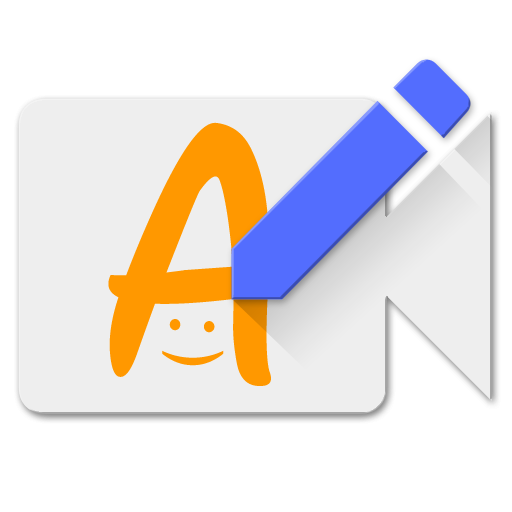
<style>
.page{position:relative;width:512px;height:512px;background:#ffffff}
.page>*{position:absolute;margin:0}
.t1{font:375px "ScriptME3";color:#ff9800}
.t2{font:100px "ScriptME3";color:#ff9800}
.t3{font:75px "DINAlternate-Bold";color:#ff9800}
</style>
<div class="page">
<p class="t1" style="left:108px;top:122px;width:163px;height:264px">A</p>
<p class="t2" style="left:162px;top:319px;width:62px;height:47px;rotate:90deg">: <span class="t3">)</span></p>
</div>
